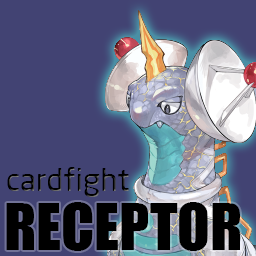
<style>
.page{position:relative;width:256px;height:256px;background:#424373}
.page>*{position:absolute;margin:0}
.t1{font:31px "NeoSans";color:#000000}
.t2{font:60px "Impact";color:#000000}
</style>
<div class="page">
<p class="t1" style="left:7px;top:167px;width:122px;height:30px">cardfight</p>
<p class="t2" style="left:6px;top:202px;width:234px;height:49px">RECEPTOR</p>
</div>
